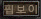
<style>
.page{position:relative;width:41px;height:19px}
.page>*{position:absolute;margin:0}
.t1{font:10px "NanumBarunGothic";letter-spacing:0.2em;color:#8c7b69;scale:1.11 1}
</style>
<div class="page">
<p class="t1" style="left:4px;top:5px;width:33px;height:10px">핍보이</p>
</div>
